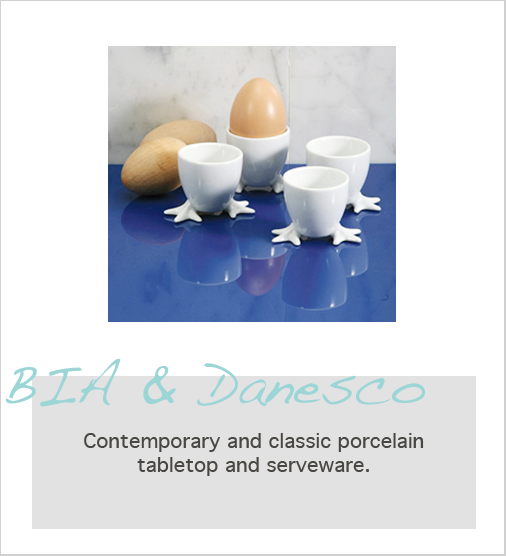
<style>
.page{position:relative;width:506px;height:556px;background:#ffffff}
.page>*{position:absolute;margin:0}
.t1{font:56px "Handwriting-Dakota";color:#9bd5d5}
.t2{font:20px "Geneva";color:#484743}
</style>
<div class="page">
<p class="t1" style="left:5px;top:358px;width:420px;height:49px">BIA &amp; Danesco</p>
<p class="t2" style="left:84px;top:433px;width:340px;height:43px;text-align:center">Contemporary and classic porcelain tabletop and serveware.</p>
</div>
